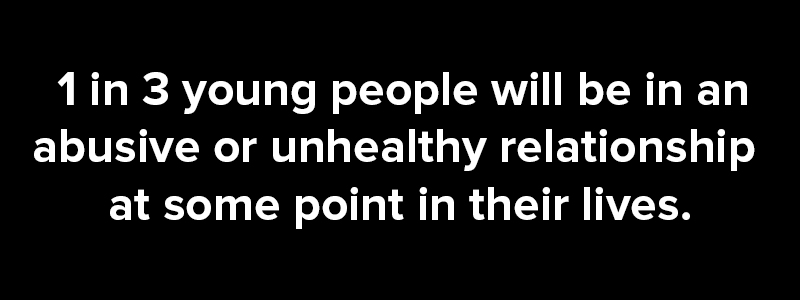
<style>
.page{position:relative;width:800px;height:300px;background:#000000}
.page>*{position:absolute;margin:0}
.t1{font:48px "ProximaNova-Bold";color:#ffffff}
.t2{font:48px "ProximaNova-Bold";color:#000000}
</style>
<div class="page">
<p class="t1" style="left:34px;top:72px;width:721px;height:157px;text-align:center"><span class="t2">1</span>1 in 3 young people will be in an <br>abusive or unhealthy relationship <br>at some point in their lives.</p>
</div>
